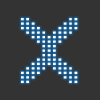
<style>
.page{position:relative;width:100px;height:100px;background:#333333}
.page>*{position:absolute;margin:0}
.t1{font:44.8px "TripleDotDigital-7";color:#ffffff;scale:1.19 1}
</style>
<div class="page">
<p class="t1" style="left:21px;top:18px;width:57px;height:65px">X</p>
</div>
